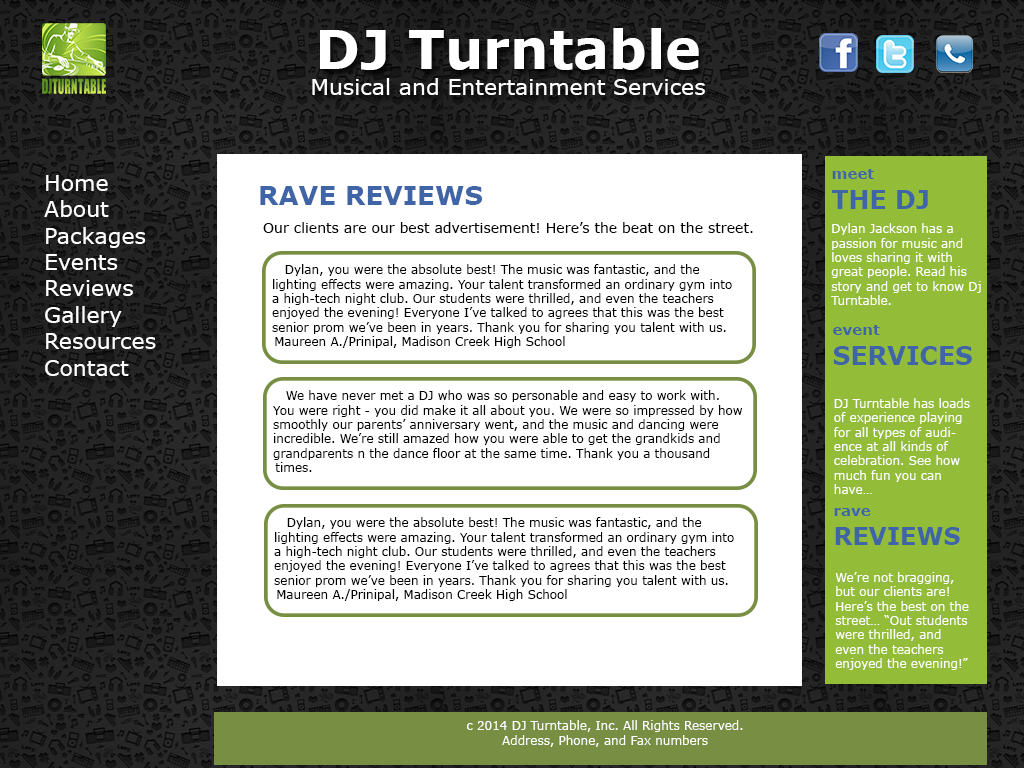
<style>
.page{position:relative;width:1024px;height:768px;background:#ffffff}
.page>*{position:absolute;margin:0}
.t1{font:22px "Verdana";color:#ffffff}
.t2{font:54px "Verdana-Bold";color:#ffffff}
.t3{font:25px "Verdana-Bold";color:#3f65a6}
.t4{font:17px "Verdana-Bold";color:#3f65a6}
.t5{font:15px "Verdana-Bold";color:#3f65a6}
.t6{font:26px "Verdana-Bold";color:#3f65a6}
.t7{font:14px "Verdana";color:#000000}
.t8{font:12px "Verdana";color:#ffffff}
.t9{font:12px "Verdana-Bold";color:#ffffff}
.t10{font:12px "Verdana";color:#000000}
.t11{font:24px "Verdana-Bold";color:#3f65a6}
</style>
<div class="page">
<p class="t1" style="left:312px;top:28px;width:393px;height:67px;text-align:center"><span class="t2">DJ Turntable<br></span>Musical and Entertainment Services</p>
<p class="t3" style="left:832px;top:169px;width:96px;height:40px"><span class="t4"><br></span><span class="t5">meet<br></span>THE DJ</p>
<p class="t1" style="left:44px;top:175px;width:112px;height:201px">Home<br>About<br>Packages<br>Events<br>Reviews<br>Gallery<br>Resources<br>Contact</p>
<p class="t6" style="left:260px;top:186px;width:222px;height:19px">RAVE REVIEWS</p>
<p class="t7" style="left:263px;top:222px;width:490px;height:11px">Our clients are our best advertisement! Here’s the beat on the street.</p>
<p class="t8" style="left:831px;top:223px;width:150px;height:82px;text-align:center"><span class="t9"><br></span>Dylan Jackson has a passion for music and loves sharing it with great people. Read his story and get to know Dj Turntable.</p>
<p class="t10" style="left:272px;top:264px;width:460px;height:84px">Dylan, you were the absolute best! The music was fantastic, and the lighting effects were amazing. Your talent transformed an ordinary gym into a high-tech night club. Our students were thrilled, and even the teachers enjoyed the evening! Everyone I’ve talked to agrees that this was the best senior prom we’ve been in years. Thank you for sharing you talent with us. <br>Maureen A./Prinipal, Madison Creek High School</p>
<p class="t3" style="left:833px;top:325px;width:139px;height:40px"><span class="t4"><br></span><span class="t5">event<br></span>SERVICES</p>
<p class="t10" style="left:273px;top:390px;width:470px;height:82px">We have never met a DJ who was so personable and easy to work with. You were right - you did make it all about you. We were so impressed by how smoothly our parents’ anniversary went, and the music and dancing were incredible. We’re still amazed how you were able to get the grandkids and grandparents n the dance floor at the same time. Thank you a thousand times.<br>Emma, Bridget, and Seth</p>
<p class="t8" style="left:834px;top:398px;width:136px;height:96px">DJ Turntable has loads of experience playing for all types of audience at all kinds of celebration. See how much fun you can have…</p>
<p class="t11" style="left:834px;top:508px;width:126px;height:37px"><span class="t4"><br></span><span class="t5">rave<br></span>REVIEWS</p>
<p class="t10" style="left:274px;top:517px;width:460px;height:84px">Dylan, you were the absolute best! The music was fantastic, and the lighting effects were amazing. Your talent transformed an ordinary gym into a high-tech night club. Our students were thrilled, and even the teachers enjoyed the evening! Everyone I’ve talked to agrees that this was the best senior prom we’ve been in years. Thank you for sharing you talent with us. <br>Maureen A./Prinipal, Madison Creek High School</p>
<p class="t8" style="left:835px;top:572px;width:134px;height:98px">We’re not bragging, but our clients are! Here’s the best on the street… “Out students were thrilled, and even the teachers enjoyed the evening!”</p>
<p class="t8" style="left:467px;top:720px;width:276px;height:27px;text-align:center">c 2014 DJ Turntable, Inc. All Rights Reserved.<br>Address, Phone, and Fax numbers<br>DJ_Turntable email address</p>
</div>
